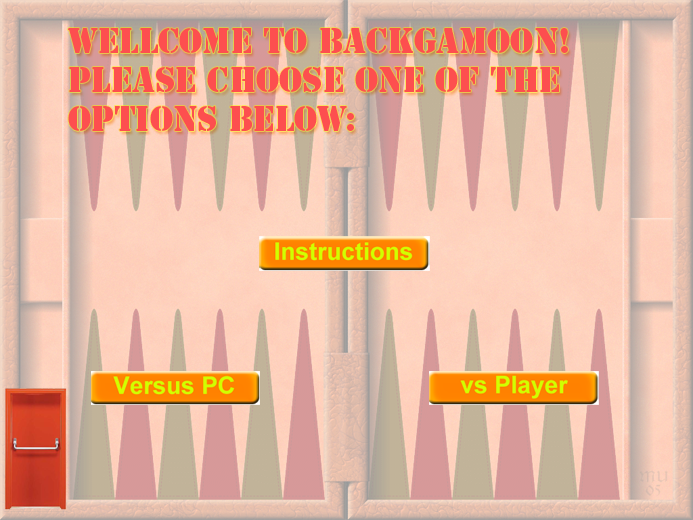
<style>
.page{position:relative;width:693px;height:520px}
.page>*{position:absolute;margin:0}
.t1{font:32.5px "StencilStd";color:#fd4f4f}
</style>
<div class="page">
<p class="t1" style="left:68px;top:28px;width:500px;height:103px">wELLCOME TO bACKGAMOON!<br>pLEASE CHOOSE one of the options below:</p>
</div>
